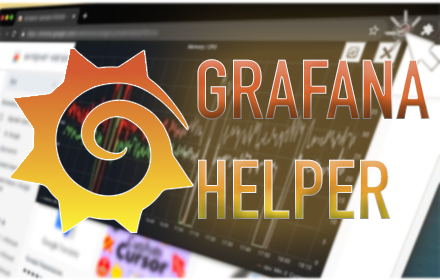
<style>
.page{position:relative;width:440px;height:280px}
.page>*{position:absolute;margin:0}
.t1{font:83.3px "DINCondensed-Bold"}
</style>
<div class="page">
<p class="t1" style="left:197px;top:59px;width:233px;height:160px">GRAFANA<br>HELPER</p>
</div>
